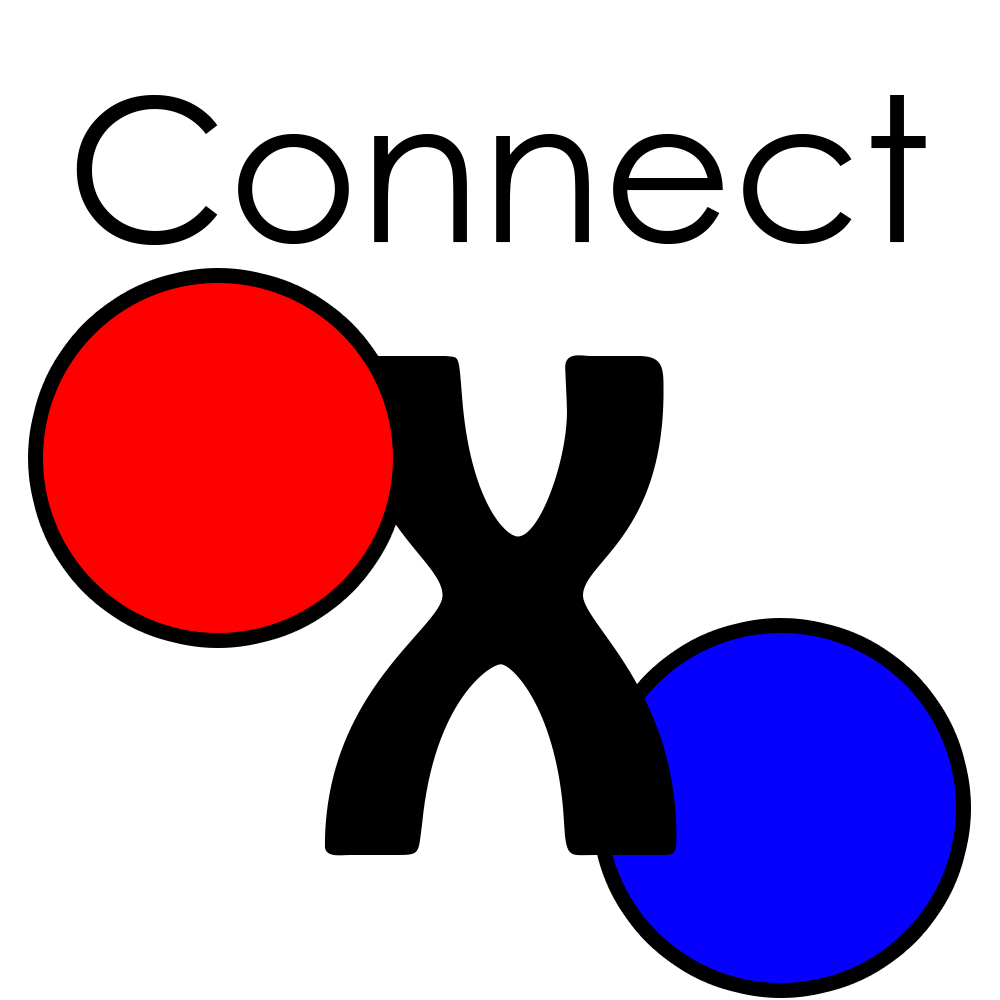
<style>
.page{position:relative;width:1000px;height:1000px;background:#ffffff}
.page>*{position:absolute;margin:0}
.t1{font:200px "CenturyGothic";color:#000000}
.t2{font:600px "HoboStd";color:#000000}
</style>
<div class="page">
<p class="t1" style="left:76px;top:95px;width:850px;height:150px">Connect</p>
<p class="t2" style="left:324px;top:355px;width:353px;height:501px">X</p>
</div>
